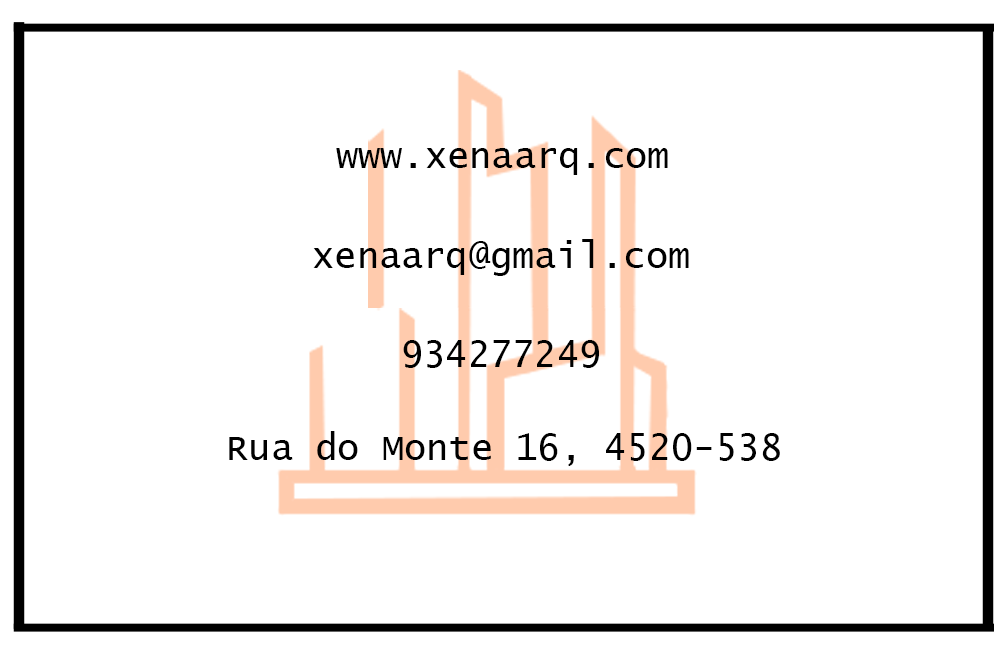
<style>
.page{position:relative;width:1004px;height:650px;background:#ffffff}
.page>*{position:absolute;margin:0}
.t1{font:36.9px "LucidaConsole";color:#000000}
</style>
<div class="page">
<p class="t1" style="left:336px;top:148px;width:332px;height:27px">www.xenaarq.com</p>
<p class="t1" style="left:313px;top:239px;width:376px;height:37px">xenaarq@gmail.com</p>
<p class="t1" style="left:403px;top:340px;width:196px;height:28px">934277249</p>
<p class="t1" style="left:229px;top:431px;width:551px;height:35px">Rua do Monte 16, 4520-538</p>
</div>
